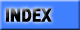
<style>
.page{position:relative;width:80px;height:30px;background:#4080ff}
.page>*{position:absolute;margin:0}
.t1{font:18px "GothicXB-HM"}
</style>
<div class="page">
<p class="t1" style="left:6px;top:8px;width:46px;height:14px">INDEX</p>
</div>
